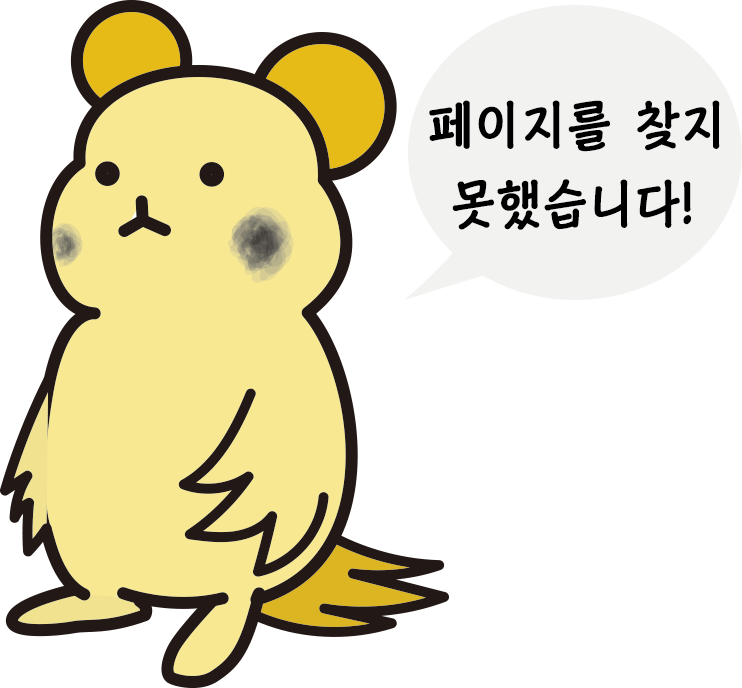
<style>
.page{position:relative;width:742px;height:688px;background:#ffffff}
.page>*{position:absolute;margin:0}
.t1{font:52px/79px "KoreanCNM-B";letter-spacing:0.02em;color:#000000}
</style>
<div class="page">
<p class="t1" style="left:429px;top:100px;width:291px;height:130px">페이지를 찾지<br> 못했습니다!</p>
</div>
